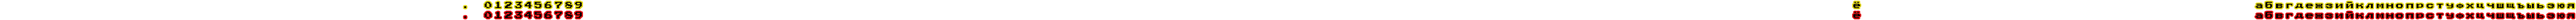
<style>
.page{position:relative;width:2576px;height:20px;background:#ffffff}
.page>*{position:absolute;margin:0}
.t1{font:7.5px "PressStart2P-Regular";color:#010101}
.t2{font:5.8px "PressStart2P-Regular";color:#010101;scale:1.3 1}
.t3{font:5.7px "PressStart2P-Regular";color:#010101;scale:1.33 1}
.t4{font:5.8px "PressStart2P-Regular";color:#010101;scale:1.31 1}
.t5{font:4.9px "PressStart2P-Regular";color:#010101;scale:1.53 1}
.t6{font:5.9px "PressStart2P-Regular";color:#010101;scale:1.29 1}
</style>
<div class="page">
<p class="t1" style="left:484px;top:2px;width:8px;height:6px">0</p>
<p class="t1" style="left:495px;top:2px;width:6px;height:6px">1</p>
<p class="t1" style="left:505px;top:2px;width:7px;height:6px">2</p>
<p class="t1" style="left:515px;top:2px;width:7px;height:6px">3</p>
<p class="t1" style="left:525px;top:2px;width:7px;height:6px">4</p>
<p class="t1" style="left:535px;top:2px;width:6px;height:6px">5</p>
<p class="t1" style="left:545px;top:2px;width:7px;height:6px">6</p>
<p class="t1" style="left:555px;top:2px;width:7px;height:6px">7</p>
<p class="t1" style="left:565px;top:2px;width:7px;height:6px">8</p>
<p class="t1" style="left:575px;top:2px;width:7px;height:6px">9</p>
<p class="t1" style="left:1853px;top:2px;width:7px;height:6px">ё</p>
<p class="t1" style="left:2255px;top:4px;width:8px;height:4px">a</p>
<p class="t1" style="left:2265px;top:2px;width:7px;height:6px">б</p>
<p class="t1" style="left:2276px;top:4px;width:7px;height:4px">в</p>
<p class="t1" style="left:2286px;top:4px;width:6px;height:4px">г</p>
<p class="t2" style="left:2295px;top:4px;width:8px;height:4px">д</p>
<p class="t1" style="left:2306px;top:4px;width:7px;height:4px">е</p>
<p class="t1" style="left:2316px;top:4px;width:7px;height:4px">ж</p>
<p class="t1" style="left:2326px;top:4px;width:7px;height:4px">з</p>
<p class="t1" style="left:2336px;top:4px;width:7px;height:4px">и</p>
<p class="t1" style="left:2346px;top:2px;width:7px;height:6px">й</p>
<p class="t1" style="left:2356px;top:4px;width:7px;height:4px">к</p>
<p class="t1" style="left:2366px;top:4px;width:7px;height:4px">л</p>
<p class="t1" style="left:2377px;top:4px;width:7px;height:4px">м</p>
<p class="t1" style="left:2386px;top:4px;width:8px;height:4px">н</p>
<p class="t1" style="left:2396px;top:4px;width:7px;height:4px">о</p>
<p class="t1" style="left:2406px;top:4px;width:7px;height:4px">п</p>
<p class="t3" style="left:2416px;top:4px;width:7px;height:4px">р</p>
<p class="t1" style="left:2426px;top:4px;width:7px;height:4px">с</p>
<p class="t1" style="left:2437px;top:4px;width:6px;height:4px">т</p>
<p class="t4" style="left:2446px;top:4px;width:7px;height:4px">у</p>
<p class="t5" style="left:2457px;top:4px;width:6px;height:4px">ф</p>
<p class="t1" style="left:2467px;top:4px;width:6px;height:4px">х</p>
<p class="t6" style="left:2477px;top:4px;width:7px;height:4px">ц</p>
<p class="t1" style="left:2487px;top:4px;width:7px;height:4px">ч</p>
<p class="t1" style="left:2497px;top:4px;width:7px;height:4px">ш</p>
<p class="t2" style="left:2507px;top:4px;width:7px;height:4px">щ</p>
<p class="t1" style="left:2518px;top:4px;width:6px;height:4px">ъ</p>
<p class="t1" style="left:2527px;top:4px;width:7px;height:4px">ы</p>
<p class="t1" style="left:2537px;top:4px;width:7px;height:4px">ь</p>
<p class="t1" style="left:2547px;top:4px;width:8px;height:4px">э</p>
<p class="t1" style="left:2558px;top:4px;width:7px;height:4px">ю</p>
<p class="t1" style="left:2567px;top:4px;width:7px;height:4px">я</p>
<p class="t1" style="left:464px;top:16px;width:3px;height:2px">.</p>
<p class="t1" style="left:464px;top:6px;width:3px;height:2px">.</p>
<p class="t1" style="left:484px;top:12px;width:8px;height:6px">0</p>
<p class="t1" style="left:495px;top:12px;width:6px;height:6px">1</p>
<p class="t1" style="left:505px;top:12px;width:7px;height:6px">2</p>
<p class="t1" style="left:515px;top:12px;width:7px;height:6px">3</p>
<p class="t1" style="left:525px;top:12px;width:7px;height:6px">4</p>
<p class="t1" style="left:535px;top:12px;width:6px;height:6px">5</p>
<p class="t1" style="left:545px;top:12px;width:7px;height:6px">6</p>
<p class="t1" style="left:555px;top:12px;width:7px;height:6px">7</p>
<p class="t1" style="left:565px;top:12px;width:7px;height:6px">8</p>
<p class="t1" style="left:575px;top:12px;width:7px;height:6px">9</p>
<p class="t1" style="left:1853px;top:12px;width:7px;height:6px">ё</p>
<p class="t1" style="left:2255px;top:14px;width:8px;height:4px">a</p>
<p class="t1" style="left:2265px;top:12px;width:7px;height:6px">б</p>
<p class="t1" style="left:2276px;top:14px;width:7px;height:4px">в</p>
<p class="t1" style="left:2286px;top:14px;width:6px;height:4px">г</p>
<p class="t2" style="left:2295px;top:14px;width:8px;height:4px">д</p>
<p class="t1" style="left:2306px;top:14px;width:7px;height:4px">е</p>
<p class="t1" style="left:2316px;top:14px;width:7px;height:4px">ж</p>
<p class="t1" style="left:2326px;top:14px;width:7px;height:4px">з</p>
<p class="t1" style="left:2336px;top:14px;width:7px;height:4px">и</p>
<p class="t1" style="left:2346px;top:12px;width:7px;height:6px">й</p>
<p class="t1" style="left:2356px;top:14px;width:7px;height:4px">к</p>
<p class="t1" style="left:2366px;top:14px;width:7px;height:4px">л</p>
<p class="t1" style="left:2377px;top:14px;width:7px;height:4px">м</p>
<p class="t1" style="left:2386px;top:14px;width:8px;height:4px">н</p>
<p class="t1" style="left:2396px;top:14px;width:7px;height:4px">о</p>
<p class="t1" style="left:2406px;top:14px;width:7px;height:4px">п</p>
<p class="t3" style="left:2416px;top:14px;width:7px;height:4px">р</p>
<p class="t1" style="left:2426px;top:14px;width:7px;height:4px">с</p>
<p class="t1" style="left:2437px;top:14px;width:6px;height:4px">т</p>
<p class="t4" style="left:2446px;top:14px;width:7px;height:4px">у</p>
<p class="t5" style="left:2457px;top:14px;width:6px;height:4px">ф</p>
<p class="t1" style="left:2467px;top:14px;width:6px;height:4px">х</p>
<p class="t6" style="left:2477px;top:14px;width:7px;height:4px">ц</p>
<p class="t1" style="left:2487px;top:14px;width:7px;height:4px">ч</p>
<p class="t1" style="left:2497px;top:14px;width:7px;height:4px">ш</p>
<p class="t2" style="left:2507px;top:14px;width:7px;height:4px">щ</p>
<p class="t1" style="left:2518px;top:14px;width:6px;height:4px">ъ</p>
<p class="t1" style="left:2527px;top:14px;width:7px;height:4px">ы</p>
<p class="t1" style="left:2537px;top:14px;width:7px;height:4px">ь</p>
<p class="t1" style="left:2547px;top:14px;width:8px;height:4px">э</p>
<p class="t1" style="left:2558px;top:14px;width:7px;height:4px">ю</p>
<p class="t1" style="left:2567px;top:14px;width:7px;height:4px">я</p>
</div>
